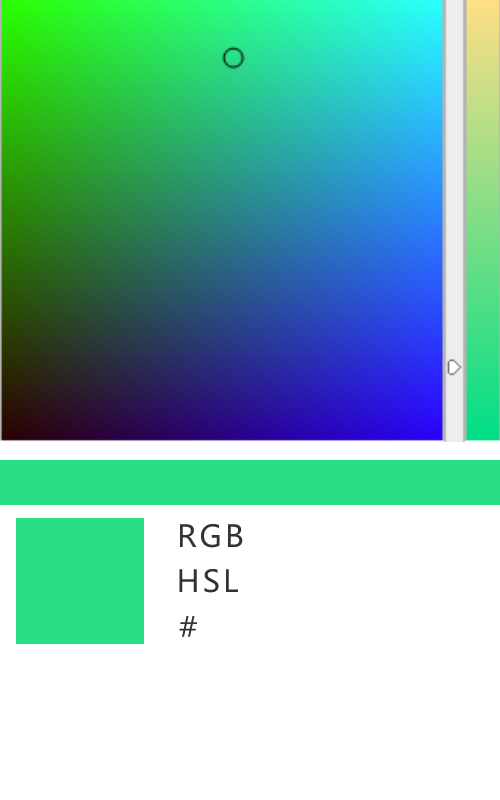
<style>
.page{position:relative;width:500px;height:800px;background:#ffffff}
.page>*{position:absolute;margin:0}
.t1{font:29.9px "MicrosoftYaHei";letter-spacing:0.1em;color:#333333}
.t2{font:30px "MicrosoftYaHei";letter-spacing:0.1em;color:#333333}
</style>
<div class="page">
<p class="t1" style="left:180px;top:524px;width:63px;height:24px">RGB</p>
<p class="t1" style="left:179px;top:569px;width:59px;height:24px">HSL</p>
<p class="t2" style="left:179px;top:616px;width:19px;height:21px">#</p>
</div>
